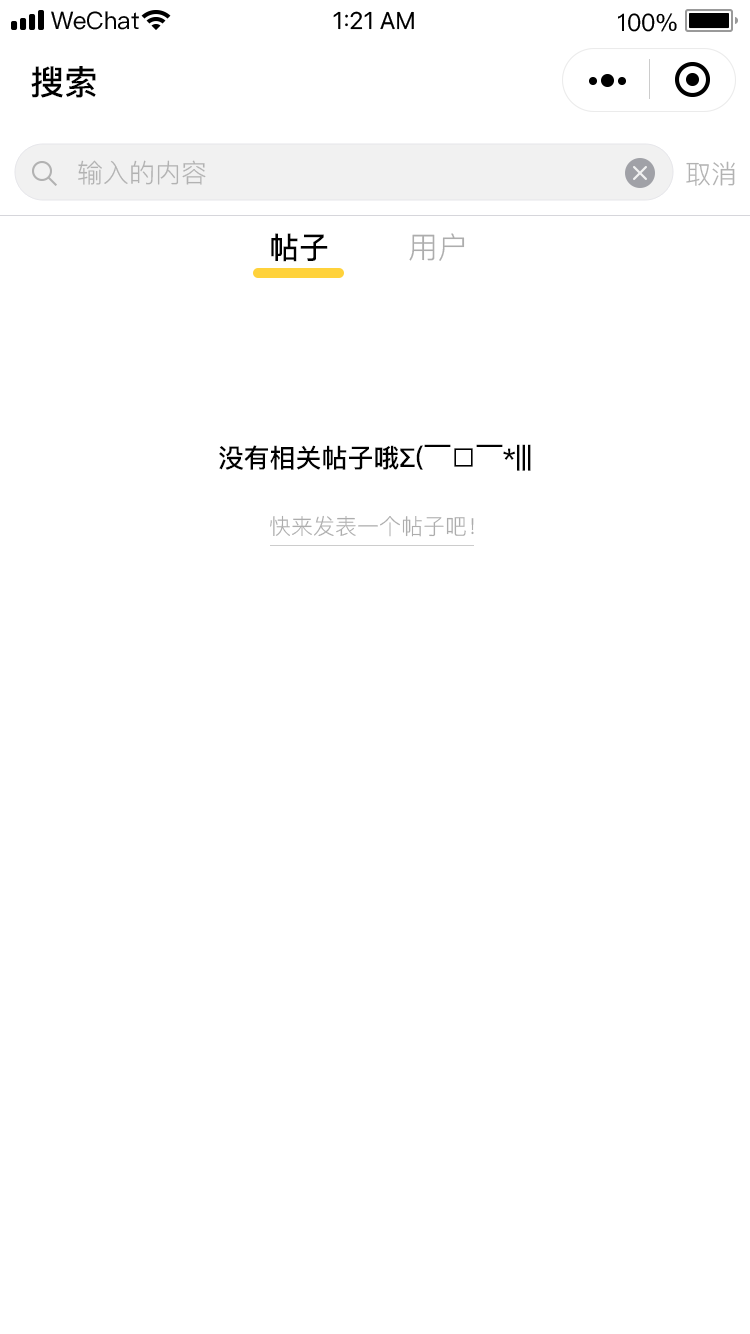
<style>
.page{position:relative;width:750px;height:1334px;background:#ffffff}
.page>*{position:absolute;margin:0}
.t1{font:34px "PingFang-SC-Bold";color:#000000}
.t2{font:26px "PingFangSC-Regular";color:#b2b2b2}
.t3{font:30px "PingFang-SC-Bold";color:#000000}
.t4{font:30px "PingFang-SC-Regular";color:#adadad}
.t5{font:26px "PingFang-SC-Bold";color:#000000}
.t6{font:22px "PingFang-SC-Regular";color:#adadad}
</style>
<div class="page">
<p class="t1" style="left:31px;top:66px;width:65px;height:32px">搜索</p>
<p class="t2" style="left:78px;top:160px;width:128px;height:25px">输入的内容</p>
<p class="t2" style="left:686px;top:161px;width:49px;height:25px">取消</p>
<p class="t3" style="left:271px;top:233px;width:57px;height:29px">帖子</p>
<p class="t4" style="left:409px;top:233px;width:56px;height:28px">用户</p>
<p class="t5" style="left:219px;top:444px;width:312px;height:27px">没有相关帖子哦∑(￣□￣*|||</p>
<p class="t6" style="left:270px;top:515px;width:204px;height:22px">快来发表一个帖子吧！</p>
</div>
